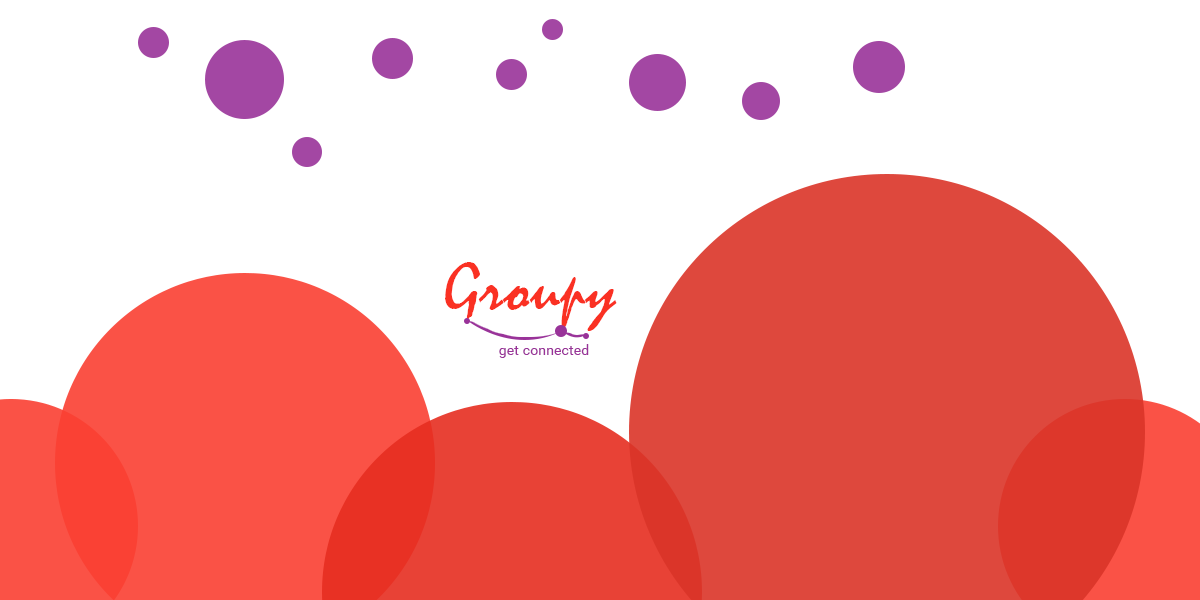
<style>
.page{position:relative;width:1200px;height:600px;background:#ffffff}
.page>*{position:absolute;margin:0}
.t1{font:72px "Mistral";letter-spacing:0.01em;color:#fa3123}
.t2{font:14px "Roboto-Regular";letter-spacing:0.01em;color:#993399}
</style>
<div class="page">
<p class="t1" style="left:445px;top:262px;width:172px;height:69px">Groupy</p>
<p class="t2" style="left:499px;top:344px;width:90px;height:14px">get connected</p>
</div>
